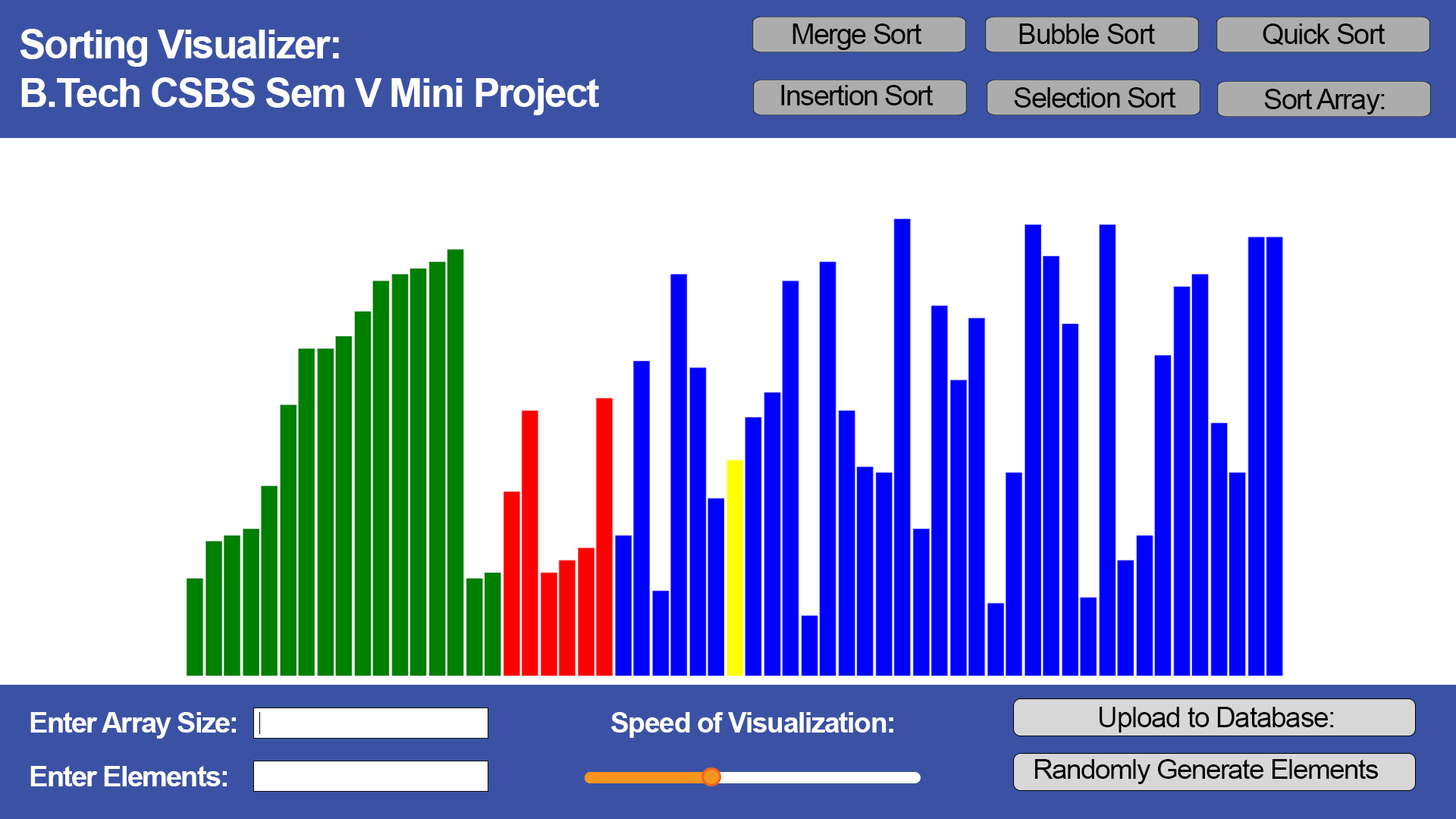
<style>
.page{position:relative;width:1456px;height:819px;background:#ffffff}
.page>*{position:absolute;margin:0}
.t1{font:40.2px "Arial-BoldMT";letter-spacing:-0.04em;color:#ffffff}
.t2{font:28.9px "ArialMT";letter-spacing:-0.04em;color:#000000}
.t3{font:28.2px "ArialMT";letter-spacing:-0.04em;color:#000000}
.t4{font:28.6px "ArialMT";letter-spacing:-0.04em;color:#000000}
.t5{font:28.8px "ArialMT";letter-spacing:-0.04em;color:#000000}
.t6{font:28.4px "Arial-BoldMT";letter-spacing:-0.04em;color:#ffffff}
.t7{font:28.2px "Arial-BoldMT";letter-spacing:-0.04em;color:#ffffff}
.t8{font:27.6px "ArialMT";letter-spacing:-0.04em;color:#000000}
</style>
<div class="page">
<p class="t1" style="left:20px;top:29px;width:579px;height:86px;text-align:right">Sorting Visualizer:<br>B.Tech CSBS Sem V Mini Project</p>
<p class="t2" style="left:792px;top:24px;width:130px;height:26px">Merge Sort</p>
<p class="t2" style="left:1019px;top:24px;width:136px;height:20px">Bubble Sort</p>
<p class="t3" style="left:1263px;top:24px;width:122px;height:21px">Quick Sort</p>
<p class="t4" style="left:781px;top:85px;width:152px;height:20px">Insertion Sort</p>
<p class="t5" style="left:1014px;top:87px;width:162px;height:21px">Selection Sort</p>
<p class="t3" style="left:1264px;top:89px;width:121px;height:26px">Sort Array:</p>
<p class="t6" style="left:30px;top:712px;width:206px;height:27px">Enter Array Size:</p>
<p class="t7" style="left:611px;top:712px;width:282px;height:26px">Speed of Visualization:</p>
<p class="t3" style="left:1100px;top:707px;width:233px;height:26px">Upload to Database:</p>
<p class="t8" style="left:1035px;top:759px;width:344px;height:25px">Randomly Generate Elements</p>
<p class="t6" style="left:30px;top:766px;width:197px;height:20px">Enter Elements:</p>
</div>
